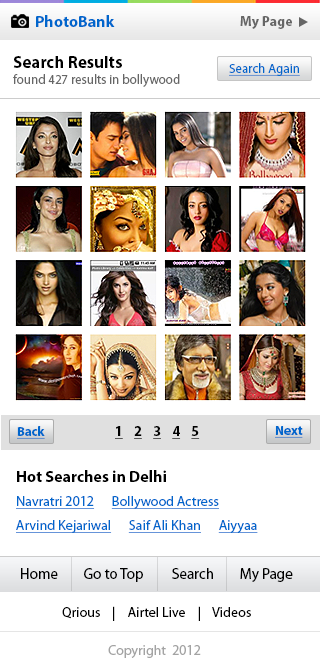
<style>
.page{position:relative;width:320px;height:669px;background:#ffffff}
.page>*{position:absolute;margin:0}
.t1{font:16px "MyriadPro-Bold";color:#0066cc}
.t2{font:14px "MyriadPro-Bold";color:#666666}
.t3{font:13px/16px "MyriadPro-Regular";color:#666666}
.t4{font:17px/20px "MyriadPro-Bold";color:#000000}
.t5{font:13px "MyriadPro-Regular";color:#0066cc;text-decoration:underline}
.t6{font:13px "MyriadPro-Bold";color:#0066cc;text-decoration:underline}
.t7{font:14px "MyriadPro-Bold";color:#000000;text-decoration:underline}
.t8{font:16px "MyriadPro-Bold";color:#000000}
.t9{font:14px/24px "MyriadPro-Regular";color:#0066cc;text-decoration:underline}
.t10{font:15px "MyriadPro-Regular";color:#000000}
.t11{font:14px "MyriadPro-Regular";color:#000000}
.t12{font:14px "MyriadPro-Regular";color:#a3a3a3}
</style>
<div class="page">
<p class="t1" style="left:36px;top:15px;width:79px;height:12px">PhotoBank</p>
<p class="t2" style="left:240px;top:16px;width:52px;height:13px">My Page</p>
<p class="t3" style="left:13px;top:56px;width:167px;height:31px"><span class="t4">Search Results <br></span>found 427 results in bollywood</p>
<p class="t5" style="left:229px;top:63px;width:71px;height:13px">Search Again</p>
<p class="t6" style="left:17px;top:426px;width:28px;height:13px">Back</p>
<p class="t7" style="left:115px;top:426px;width:85px;height:13px">1    2    3    4    5</p>
<p class="t6" style="left:275px;top:426px;width:28px;height:12px">Next</p>
<p class="t8" style="left:17px;top:470px;width:149px;height:12px">Hot Searches in Delhi</p>
<p class="t9" style="left:16px;top:496px;width:242px;height:37px">Navratri 2012      Bollywood Actress     <br>Arvind Kejariwal      Saif Ali Khan      Aiyyaa</p>
<p class="t10" style="left:21px;top:568px;width:272px;height:14px">Home        Go to Top         Search        My Page</p>
<p class="t11" style="left:62px;top:606px;width:189px;height:15px">Qrious    |    Airtel Live    |    Videos</p>
<p class="t12" style="left:108px;top:645px;width:93px;height:13px">Copyright  2012</p>
</div>
